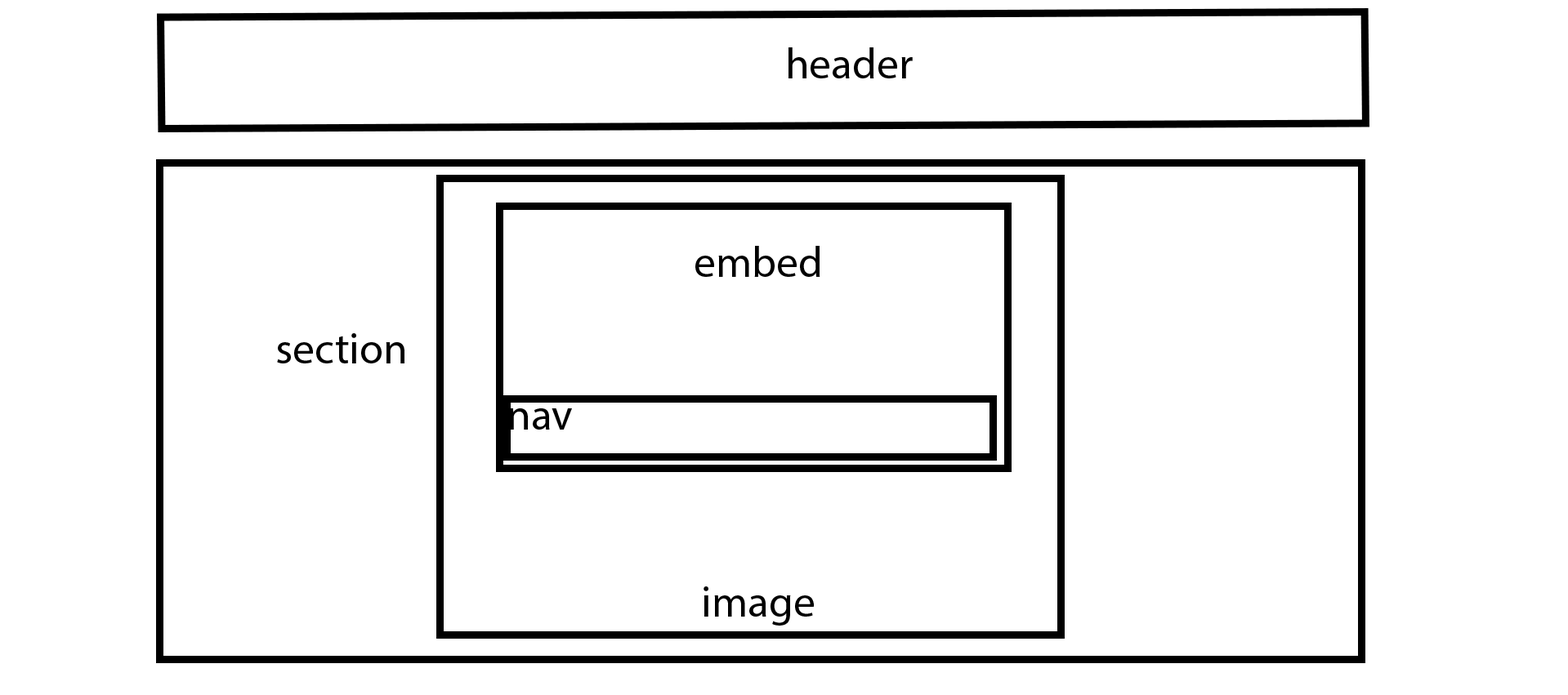
<style>
.page{position:relative;width:1568px;height:695px;background:#ffffff}
.page>*{position:absolute;margin:0}
.t1{font:43.6px "MyriadPro-Regular";color:#000000}
</style>
<div class="page">
<p class="t1" style="left:788px;top:47px;width:125px;height:31px">header</p>
<p class="t1" style="left:695px;top:246px;width:125px;height:31px">embed</p>
<p class="t1" style="left:277px;top:333px;width:127px;height:31px">section</p>
<p class="t1" style="left:509px;top:409px;width:63px;height:21px">nav</p>
<p class="t1" style="left:704px;top:587px;width:110px;height:39px">image</p>
</div>
